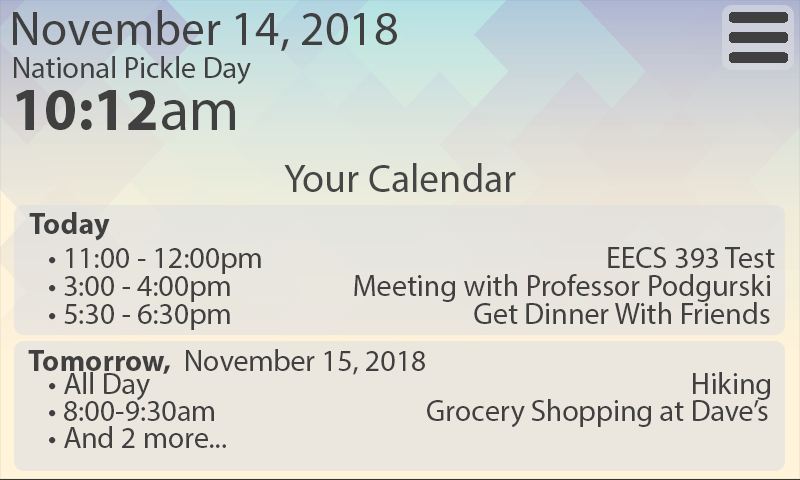
<style>
.page{position:relative;width:800px;height:480px;background:#ece7de}
.page>*{position:absolute;margin:0}
.t1{font:48px "MyriadPro-Regular";color:#404040}
.t2{font:30px "MyriadPro-Regular";color:#404040}
.t3{font:60px "MyriadPro-Bold";color:#404040}
.t4{font:60px "MyriadPro-Regular";color:#404040}
.t5{font:40px "MyriadPro-Regular";color:#464646}
.t6{font:30px "MyriadPro-Bold";color:#404040}
.t7{font:30px/28px "MyriadPro-Regular";color:#404040}
.t8{font:30px/27px "MyriadPro-Regular";color:#404040}
</style>
<div class="page">
<p class="t1" style="left:13px;top:10px;width:384px;height:41px">November 14, 2018</p>
<p class="t2" style="left:14px;top:56px;width:237px;height:29px">National Pickle Day</p>
<p class="t3" style="left:16px;top:90px;width:219px;height:40px">10:12<span class="t4">am</span></p>
<p class="t5" style="left:284px;top:163px;width:232px;height:29px">Your Calendar</p>
<p class="t6" style="left:29px;top:212px;width:81px;height:29px">Today</p>
<p class="t7" style="left:49px;top:247px;width:726px;height:83px">• 11:00 - 12:00pm                                                      EECS 393 Test<br>• 3:00 - 4:00pm                   Meeting with Professor Podgurski <br>• 5:30 - 6:30pm                                      Get Dinner With Friends</p>
<p class="t2" style="left:28px;top:349px;width:397px;height:26px"><span class="t6">Tomorrow,  </span>November 15, 2018</p>
<p class="t8" style="left:49px;top:372px;width:721px;height:76px">• All Day                                                                                     Hiking<br>• 8:00-9:30am                                 Grocery Shopping at Dave’s <br>• And 2 more...</p>
</div>
